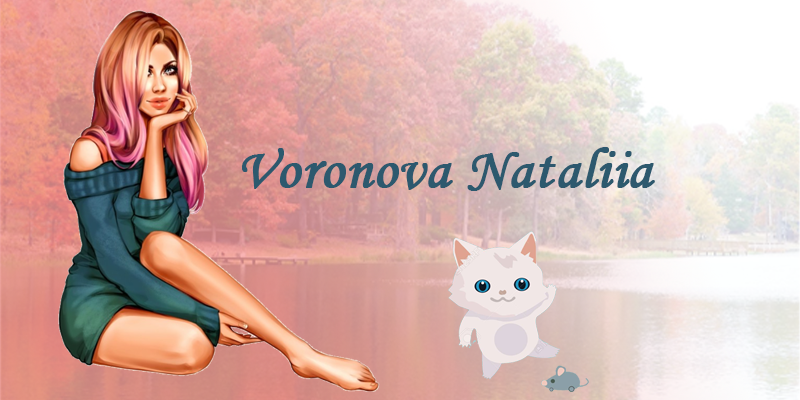
<style>
.page{position:relative;width:800px;height:400px}
.page>*{position:absolute;margin:0}
.t1{font:58.3px "MonotypeCorsiva";color:#2d596e;font-weight:bold}
</style>
<div class="page">
<p class="t1" style="left:242px;top:147px;width:413px;height:44px">Voronova Nataliia</p>
</div>
